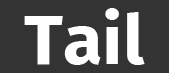
<style>
.page{position:relative;width:169px;height:73px;background:#333333}
.page>*{position:absolute;margin:0}
.t1{font:68.4px "FiraSans-Bold";color:#ffffff;scale:1.05 1}
</style>
<div class="page">
<p class="t1" style="left:24px;top:8px;width:121px;height:57px">Tail</p>
</div>
